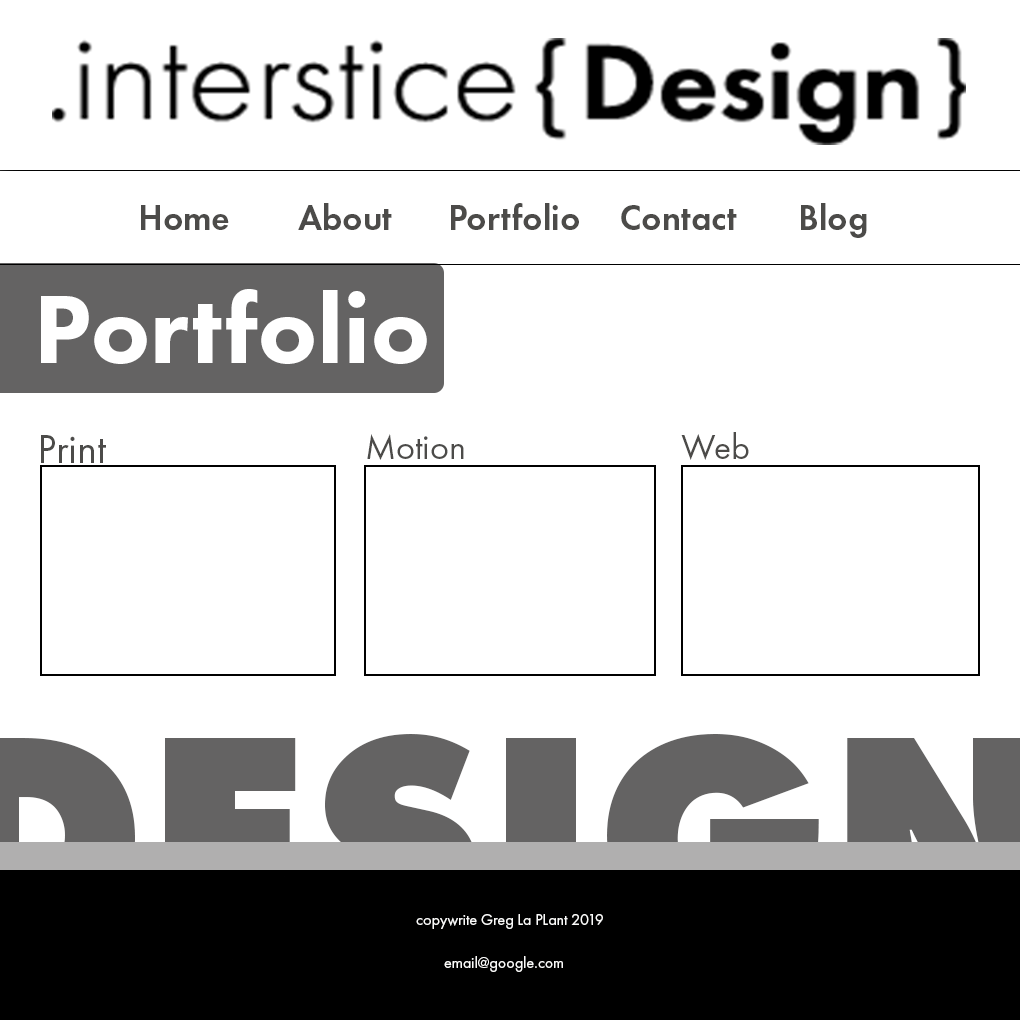
<style>
.page{position:relative;width:1020px;height:1020px;background:#ffffff}
.page>*{position:absolute;margin:0}
.t1{font:36px "FuturaPT-Demi";color:#4c4b49}
.t2{font:100px "FuturaPT-Heavy";color:#ffffff}
.t3{font:42px "FuturaPT-Book";color:#4c4b49}
.t4{font:36px "FuturaPT-Book";color:#4c4b49}
.t5{font:16px "FuturaPT-Book";color:#fbfbfa}
</style>
<div class="page">
<p class="t1" style="left:141px;top:205px;width:88px;height:25px">Home</p>
<p class="t1" style="left:298px;top:203px;width:94px;height:27px">About</p>
<p class="t1" style="left:451px;top:203px;width:128px;height:27px">Portfolio</p>
<p class="t1" style="left:621px;top:205px;width:116px;height:25px">Contact</p>
<p class="t1" style="left:801px;top:203px;width:66px;height:35px">Blog</p>
<p class="t2" style="left:41px;top:289px;width:386px;height:75px">Portfolio</p>
<p class="t3" style="left:41px;top:435px;width:65px;height:28px">Print</p>
<p class="t4" style="left:367px;top:434px;width:97px;height:26px">Motion</p>
<p class="t4" style="left:681px;top:432px;width:68px;height:28px">Web</p>
<p class="t5" style="left:416px;top:914px;width:187px;height:15px">copywrite Greg La PLant 2019</p>
<p class="t5" style="left:444px;top:956px;width:119px;height:16px">email@google.com</p>
</div>
